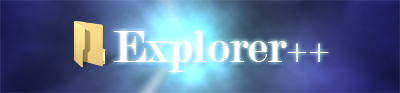
<style>
.page{position:relative;width:400px;height:93px}
.page>*{position:absolute;margin:0}
.t1{font:48px "Modern-Regular";color:#ffffff}
</style>
<div class="page">
<p class="t1" style="left:113px;top:31px;width:216px;height:41px">Explorer++</p>
</div>
